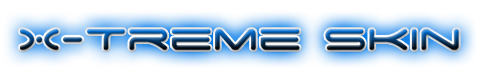
<style>
.page{position:relative;width:480px;height:80px;background:#ffffff}
.page>*{position:absolute;margin:0}
.t1{font:48px "SpaceAge"}
</style>
<div class="page">
<p class="t1" style="left:20px;top:29px;width:439px;height:21px">X-Treme skin</p>
</div>
